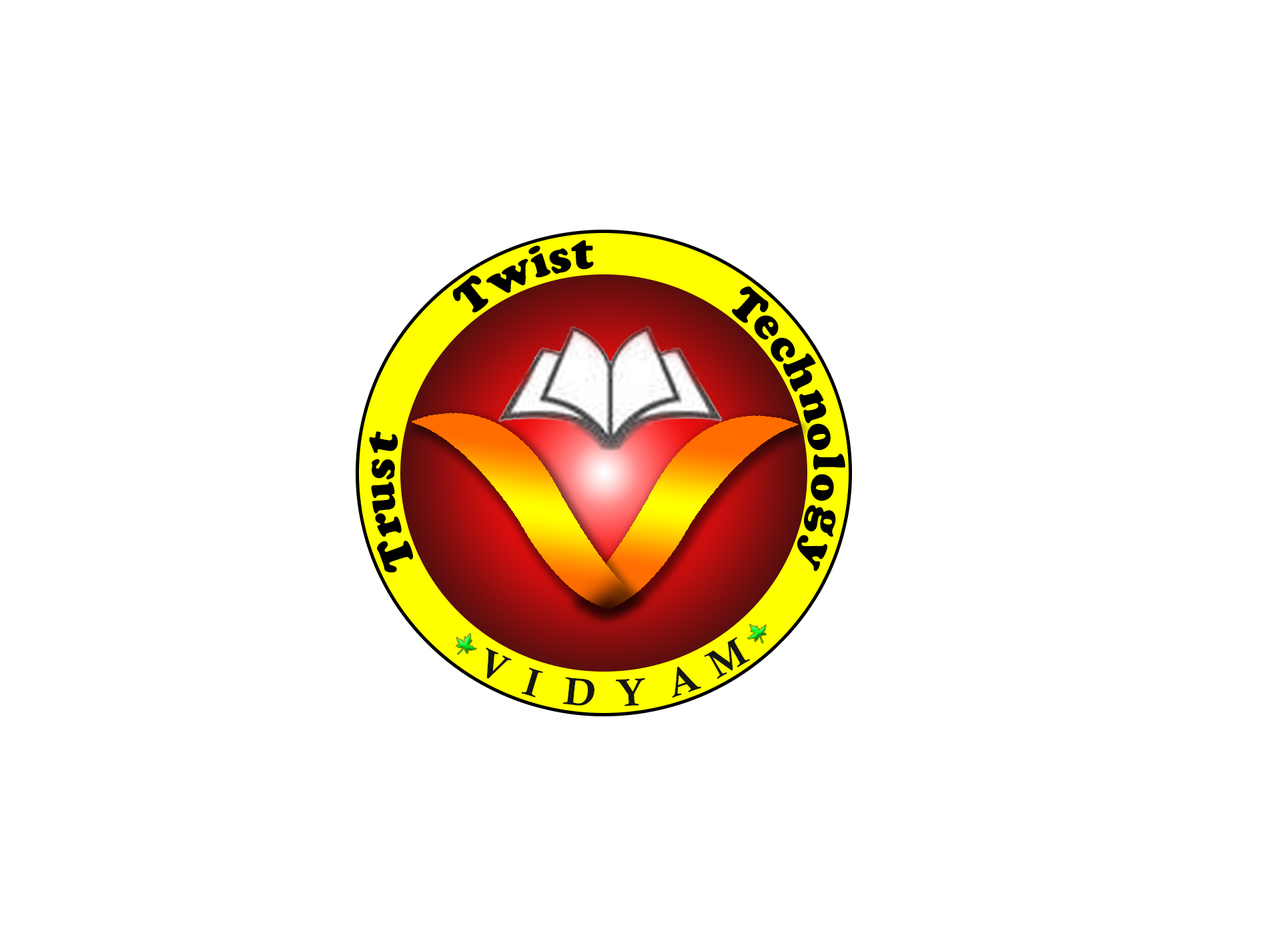
<style>
.page{position:relative;width:1261px;height:946px;background:#ffffff}
.page>*{position:absolute;margin:0}
.t1{font:44.4px "CooperBlackStd";color:#000000}
.t2{font:44.5px "CooperBlackStd";color:#000000}
.t3{font:38.9px "CalisMTBol";color:#161616}
</style>
<div class="page">
<p class="t1" style="left:528px;top:246px;width:23px;height:32px;rotate:-17deg">i</p>
<p class="t1" style="left:571px;top:240px;width:23px;height:30px;rotate:-2deg">t</p>
<p class="t1" style="left:549px;top:248px;width:22px;height:26px;rotate:-17deg">s</p>
<p class="t2" style="left:486px;top:258px;width:42px;height:35px;rotate:-27deg">w</p>
<p class="t2" style="left:452px;top:275px;width:36px;height:37px;rotate:-39deg">T</p>
<p class="t2" style="left:732px;top:286px;width:37px;height:37px;rotate:40deg">T</p>
<p class="t2" style="left:754px;top:315px;width:25px;height:25px;rotate:55deg">e</p>
<p class="t2" style="left:771px;top:338px;width:24px;height:24px;rotate:61deg">c</p>
<p class="t2" style="left:783px;top:353px;width:33px;height:39px;rotate:66deg">h</p>
<p class="t2" style="left:799px;top:389px;width:28px;height:34px;rotate:75deg">n</p>
<p class="t2" style="left:807px;top:423px;width:24px;height:27px;rotate:90deg">o</p>
<p class="t2" style="left:369px;top:431px;width:29px;height:22px;rotate:-80deg">t</p>
<p class="t2" style="left:372px;top:458px;width:23px;height:22px;rotate:-90deg">s</p>
<p class="t2" style="left:813px;top:453px;width:32px;height:17px;rotate:90deg">l</p>
<p class="t2" style="left:811px;top:474px;width:23px;height:26px;rotate:103deg">o</p>
<p class="t2" style="left:371px;top:481px;width:25px;height:33px;rotate:-94deg">u</p>
<p class="t2" style="left:804px;top:504px;width:32px;height:32px;rotate:105deg">g</p>
<p class="t2" style="left:375px;top:512px;width:27px;height:24px;rotate:-105deg">r</p>
<p class="t2" style="left:377px;top:540px;width:36px;height:33px;rotate:-110deg">T</p>
<p class="t2" style="left:797px;top:534px;width:31px;height:37px;rotate:115deg">y</p>
<p class="t3" style="left:704px;top:637px;width:47px;height:42px;rotate:-30deg">M</p>
<p class="t3" style="left:486px;top:647px;width:26px;height:32px;rotate:25deg">V</p>
<p class="t3" style="left:672px;top:666px;width:29px;height:32px;rotate:-19deg">A</p>
<p class="t3" style="left:521px;top:667px;width:22px;height:30px;rotate:17deg">I</p>
<p class="t3" style="left:563px;top:677px;width:32px;height:28px;rotate:6deg">D</p>
<p class="t3" style="left:616px;top:677px;width:29px;height:29px;rotate:-3deg">Y</p>
</div>
